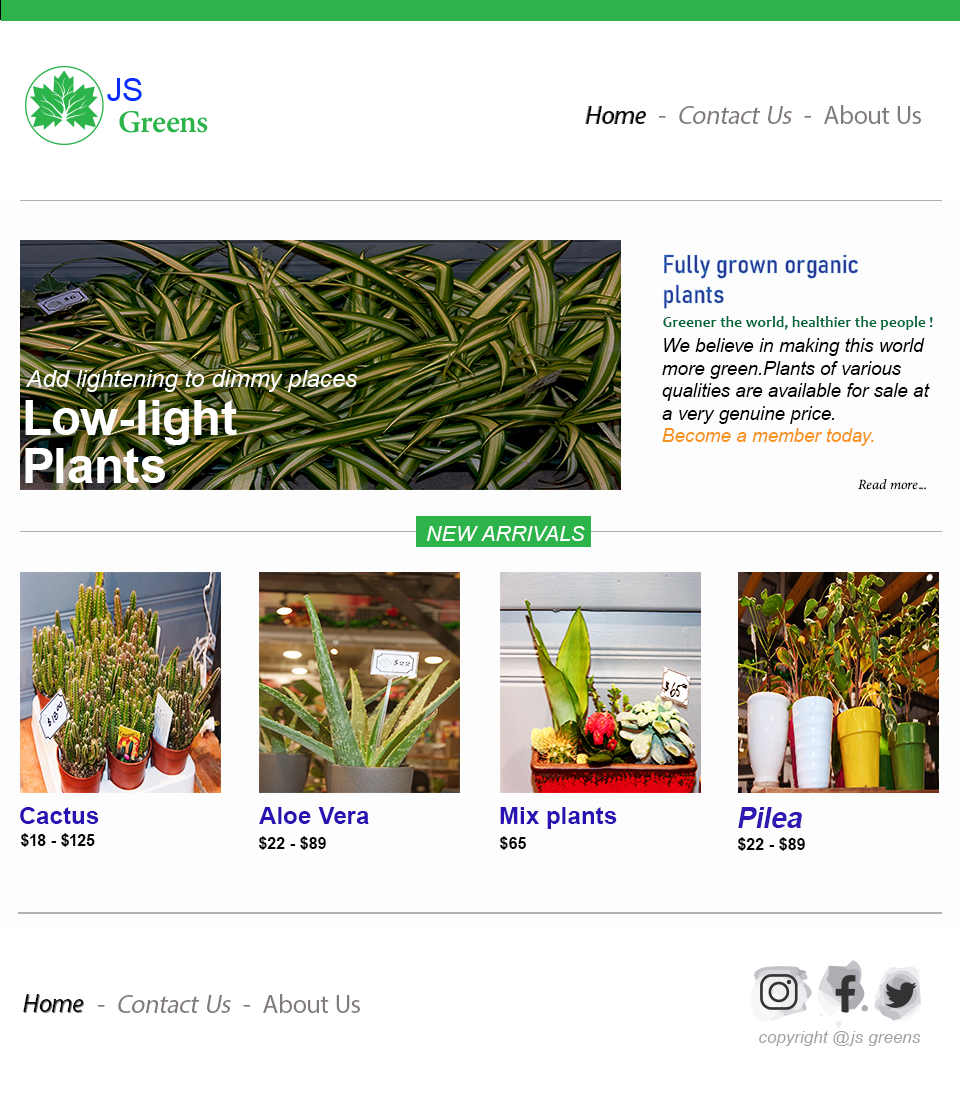
<style>
.page{position:relative;width:960px;height:1093px;background:#ffffff}
.page>*{position:absolute;margin:0}
.t1{font:26px "MyriadPro-Regular";letter-spacing:0.005em;color:#827b7b}
.t2{font:26px "MyriadPro-It";letter-spacing:0.005em;color:#827b7b}
.t3{font:26px "MyriadPro-Regular";letter-spacing:0.005em;color:#827b7b;font-style:italic}
.t4{font:26px "MyriadPro-It";letter-spacing:0.005em;color:#080808}
.t5{font:25.1px/30px "Bahnschrift-SemiCondensed";letter-spacing:0.005em;color:#2e3192}
.t6{font:15.4px "Candara-Bold";letter-spacing:0.005em;color:#006837}
.t7{font:18.8px "Arial-ItalicMT";letter-spacing:0.005em;color:#000000}
.t8{font:18.8px "Arial-ItalicMT";letter-spacing:0.005em;color:#f7931e}
.t9{font:24px "Arial-ItalicMT";letter-spacing:0.005em;color:#ffffff}
.t10{font:49.3px/48px "Arial-BoldMT";letter-spacing:0.005em;color:#ffffff}
.t11{font:14px "MinionVariableConcept-Italic";letter-spacing:0.005em;color:#000000}
.t12{font:21px "Arial-ItalicMT";letter-spacing:0.005em;color:#ffffff}
.t13{font:24px "Arial-BoldMT";letter-spacing:0.005em;color:#2812b2}
.t14{font:28.7px "Arial-BoldMT";letter-spacing:0.005em;color:#2e1ab3;font-style:italic}
.t15{font:16px "Arial-BoldMT";letter-spacing:0.005em;color:#040404}
.t16{font:17.4px "Arial-ItalicMT";letter-spacing:0.005em;color:#a59fa3}
</style>
<div class="page">
<p class="t1" style="left:585px;top:105px;width:336px;height:19px"><span class="t2">Home  </span>-  <span class="t3">Contact Us  </span>-  About Us</p>
<p class="t4" style="left:586px;top:106px;width:60px;height:18px">Home</p>
<p class="t5" style="left:663px;top:254px;width:195px;height:55px">Fully grown organic <br>plants</p>
<p class="t6" style="left:663px;top:316px;width:270px;height:14px">Greener the world, healthier the people !</p>
<p class="t7" style="left:662px;top:338px;width:268px;height:108px;text-align:justify">We believe in making this world<br>more green.Plants of various <br>qualities are available for sale at<br>a very genuine price.<br><span class="t8">Become a member today.</span></p>
<p class="t9" style="left:26px;top:370px;width:331px;height:22px">Add lightening to dimmy places</p>
<p class="t10" style="left:25px;top:400px;width:212px;height:83px;text-align:justify">Low-light <br>Plants</p>
<p class="t11" style="left:858px;top:478px;width:68px;height:12px">Read more...</p>
<p class="t12" style="left:427px;top:526px;width:158px;height:15px">NEW ARRIVALS</p>
<p class="t13" style="left:20px;top:807px;width:79px;height:17px">Cactus</p>
<p class="t13" style="left:259px;top:807px;width:110px;height:17px">Aloe Vera</p>
<p class="t13" style="left:500px;top:807px;width:117px;height:22px">Mix plants</p>
<p class="t14" style="left:738px;top:807px;width:64px;height:21px">Pilea</p>
<p class="t15" style="left:21px;top:833px;width:74px;height:14px">$18 - $125</p>
<p class="t15" style="left:259px;top:836px;width:67px;height:14px">$22 - $89</p>
<p class="t15" style="left:500px;top:836px;width:26px;height:14px">$65</p>
<p class="t15" style="left:738px;top:837px;width:67px;height:14px">$22 - $89</p>
<p class="t4" style="left:23px;top:994px;width:60px;height:18px">Home</p>
<p class="t1" style="left:24px;top:994px;width:336px;height:19px"><span class="t2">Home  </span>-  <span class="t3">Contact Us  </span>-  About Us</p>
<p class="t16" style="left:759px;top:1031px;width:162px;height:15px">copyright @js greens</p>
</div>
